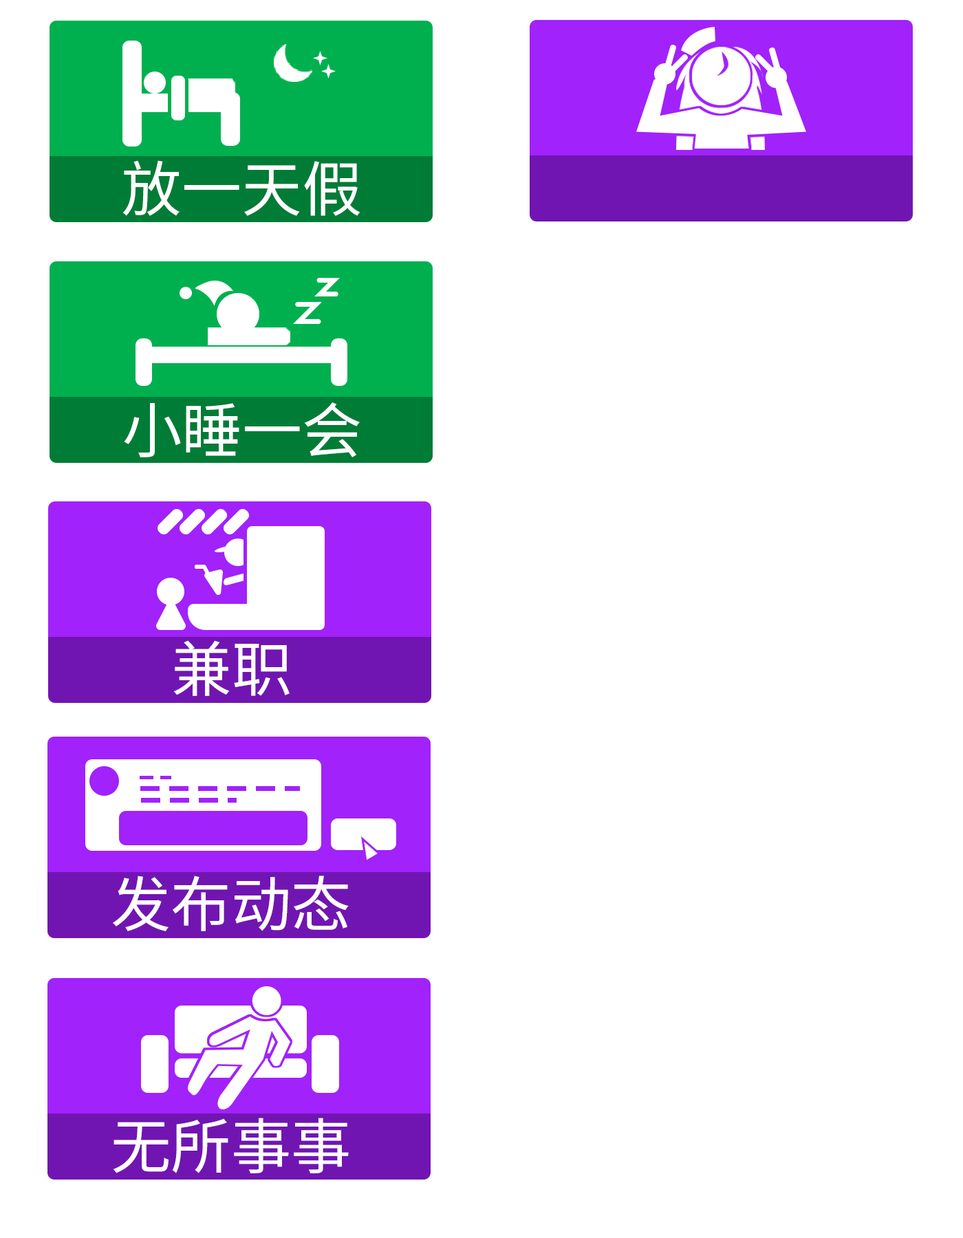
<style>
.page{position:relative;width:963px;height:1238px;background:#ffffff}
.page>*{position:absolute;margin:0}
.t1{font:60.2px "SourceHanSansCN-Regular";color:#ffffff}
</style>
<div class="page">
<p class="t1" style="left:122px;top:160px;width:238px;height:56px">放一天假</p>
<p class="t1" style="left:124px;top:402px;width:236px;height:55px">小睡一会</p>
<p class="t1" style="left:173px;top:640px;width:117px;height:56px">兼职</p>
<p class="t1" style="left:113px;top:876px;width:236px;height:55px">发布动态</p>
<p class="t1" style="left:113px;top:1118px;width:236px;height:56px">无所事事</p>
</div>
